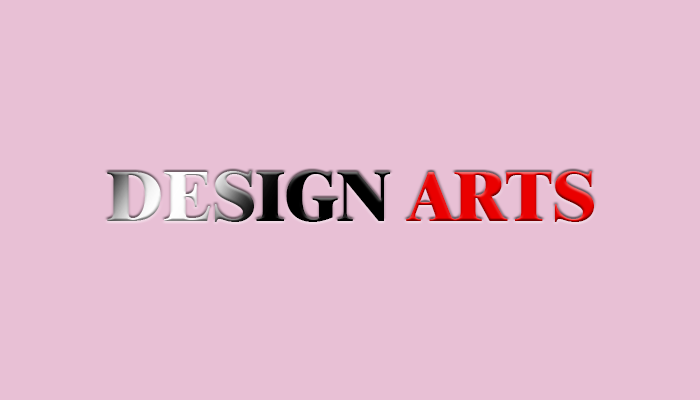
<style>
.page{position:relative;width:700px;height:400px;background:#e8c0d5}
.page>*{position:absolute;margin:0}
.t1{font:72px "Dutch801BT-ExtraBold";letter-spacing:-0.02em;text-transform:uppercase}
</style>
<div class="page">
<p class="t1" style="left:107px;top:171px;width:487px;height:51px">design arts</p>
</div>
